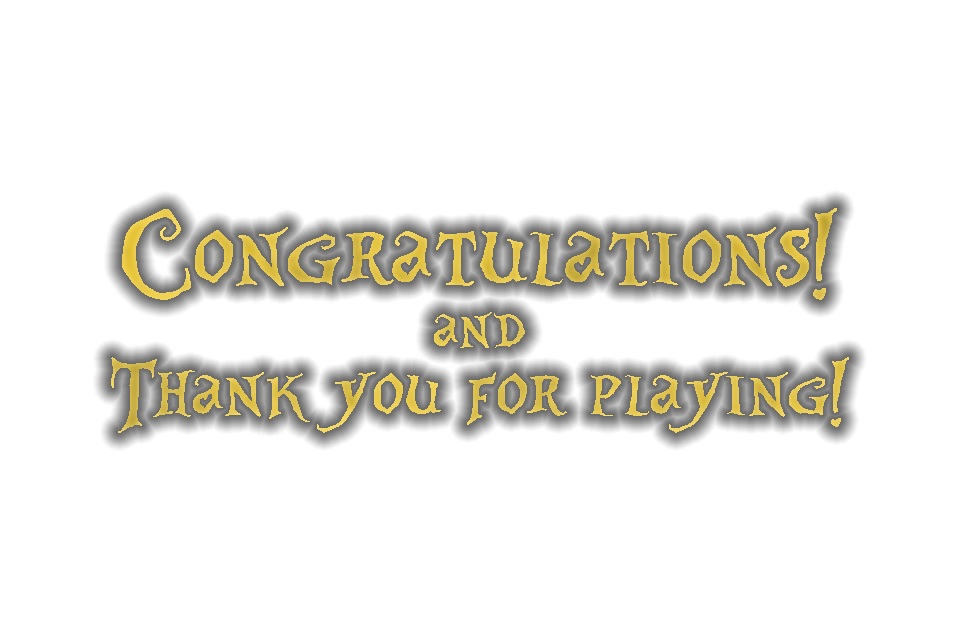
<style>
.page{position:relative;width:960px;height:640px;background:#ffffff}
.page>*{position:absolute;margin:0}
.t1{font:102.1px/70px "AliceinWonderland";color:#e3c651}
.t2{font:134.1px/70px "AliceinWonderland";color:#e3c651}
.t3{font:83.1px/57px "AliceinWonderland";color:#e3c651}
</style>
<div class="page">
<p class="t1" style="left:111px;top:208px;width:738px;height:225px;text-align:center"><span class="t2">Congratulations!<br></span><span class="t3">and<br></span>Thank you for playing!</p>
</div>
